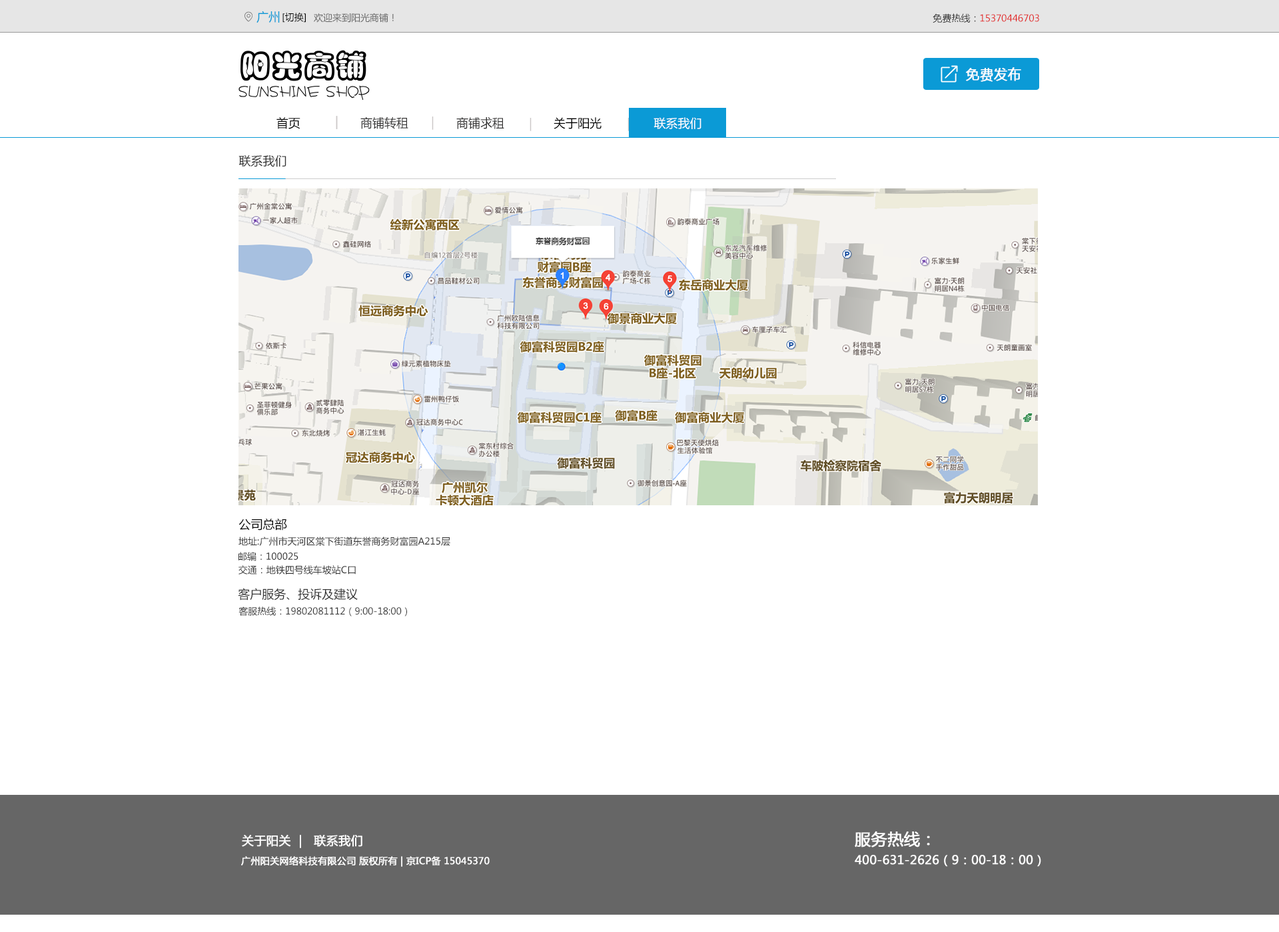
<style>
.page{position:relative;width:1279px;height:932px;background:#ffffff}
.page>*{position:absolute;margin:0}
.t1{font:12px "MicrosoftYaHei";color:#0b9ad6}
.t2{font:9.3px "MicrosoftYaHei";color:#000000}
.t3{font:9.3px "MicrosoftYaHei";color:#666666}
.t4{font:9.3px "MicrosoftYaHei";color:#e22222}
.t5{font:9.3px "MicrosoftYaHei";color:#333333}
.t6{font:13.7px "MicrosoftYaHei";color:#ffffff;text-transform:uppercase;font-weight:bold}
.t7{font:12px "MicrosoftYaHei";color:#000000}
.t8{font:12px "MicrosoftYaHei";color:#ccc8c8}
.t9{font:12.2px "MicrosoftYaHei";color:#ccc8c8}
.t10{font:12.2px "MicrosoftYaHei";color:#333232}
.t11{font:12px "MicrosoftYaHei";color:#ffffff}
.t12{font:12px "MicrosoftYaHei";color:#333333}
.t13{font:16px "MicrosoftYaHei";color:#ffffff;text-transform:uppercase;font-weight:bold}
.t14{font:12px "MicrosoftYaHei";color:#fefefe;text-transform:uppercase;font-weight:bold}
.t15{font:9.3px "MicrosoftYaHei";color:#ffffff;text-transform:uppercase;font-weight:bold}
.t16{font:12px "MicrosoftYaHei";color:#ffffff;text-transform:uppercase;font-weight:bold}
</style>
<div class="page">
<p class="t1" style="left:256px;top:11px;width:24px;height:12px">广州</p>
<p class="t2" style="left:282px;top:13px;width:24px;height:10px">[切换]</p>
<p class="t3" style="left:314px;top:13px;width:80px;height:10px">欢迎来到阳光商铺！</p>
<p class="t4" style="left:932px;top:13px;width:107px;height:10px"><span class="t5">免费热线：</span>15370446703</p>
<p class="t6" style="left:966px;top:67px;width:55px;height:15px">免费发布</p>
<p class="t7" style="left:276px;top:117px;width:24px;height:12px">首页</p>
<p class="t8" style="left:336px;top:116px;width:2px;height:13px">|</p>
<p class="t9" style="left:336px;top:116px;width:2px;height:13px">|</p>
<p class="t10" style="left:360px;top:117px;width:48px;height:12px">商铺转租</p>
<p class="t9" style="left:432px;top:117px;width:2px;height:13px">|</p>
<p class="t10" style="left:456px;top:117px;width:48px;height:12px">商铺求租</p>
<p class="t9" style="left:530px;top:118px;width:2px;height:13px">|</p>
<p class="t7" style="left:553px;top:117px;width:48px;height:12px">关于阳光</p>
<p class="t9" style="left:627px;top:118px;width:2px;height:13px">|</p>
<p class="t11" style="left:653px;top:117px;width:48px;height:12px">联系我们</p>
<p class="t12" style="left:238px;top:155px;width:48px;height:12px">联系我们</p>
<p class="t7" style="left:238px;top:519px;width:49px;height:12px">公司总部</p>
<p class="t5" style="left:238px;top:537px;width:212px;height:9px">地址:广州市天河区棠下街道东誉商务财富园A215层</p>
<p class="t5" style="left:238px;top:552px;width:60px;height:9px">邮编：100025</p>
<p class="t5" style="left:238px;top:565px;width:118px;height:10px">交通：地铁四号线车坡站C口</p>
<p class="t12" style="left:238px;top:588px;width:120px;height:13px">客户服务、投诉及建议</p>
<p class="t5" style="left:238px;top:607px;width:169px;height:10px">客服热线：19802081112（9:00-18:00）</p>
<p class="t13" style="left:855px;top:831px;width:75px;height:17px">服务热线：</p>
<p class="t14" style="left:242px;top:835px;width:120px;height:14px">关于阳关  |   联系我们</p>
<p class="t15" style="left:241px;top:857px;width:249px;height:10px">广州阳关网络科技有限公司 版权所有 | 京ICP备 15045370</p>
<p class="t16" style="left:855px;top:855px;width:186px;height:12px">400-631-2626（9：00-18：00）</p>
</div>
